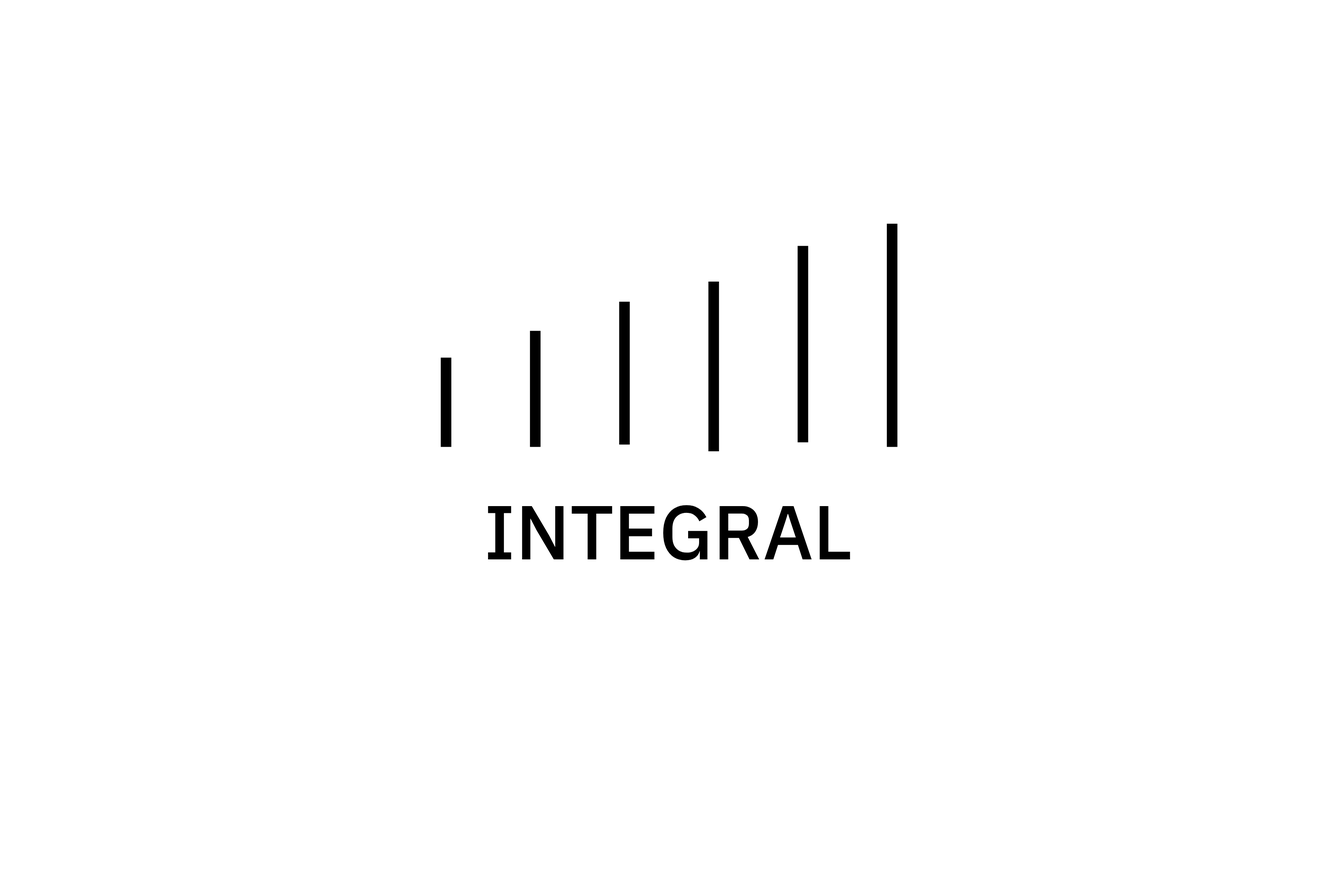
<style>
.page{position:relative;width:1337px;height:892px;background:#ffffff}
.page>*{position:absolute;margin:0}
.t1{font:76.4px "IBMPlexSans-Medium";color:#000000}
</style>
<div class="page">
<p class="t1" style="left:488px;top:505px;width:362px;height:55px">INTEGRAL</p>
</div>
